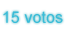
<style>
.page{position:relative;width:66px;height:35px;background:#ffffff}
.page>*{position:absolute;margin:0}
.t1{font:16px "ArialMT";color:#39bcd8}
</style>
<div class="page">
<p class="t1" style="left:3px;top:11px;width:60px;height:12px">15 votos</p>
</div>
